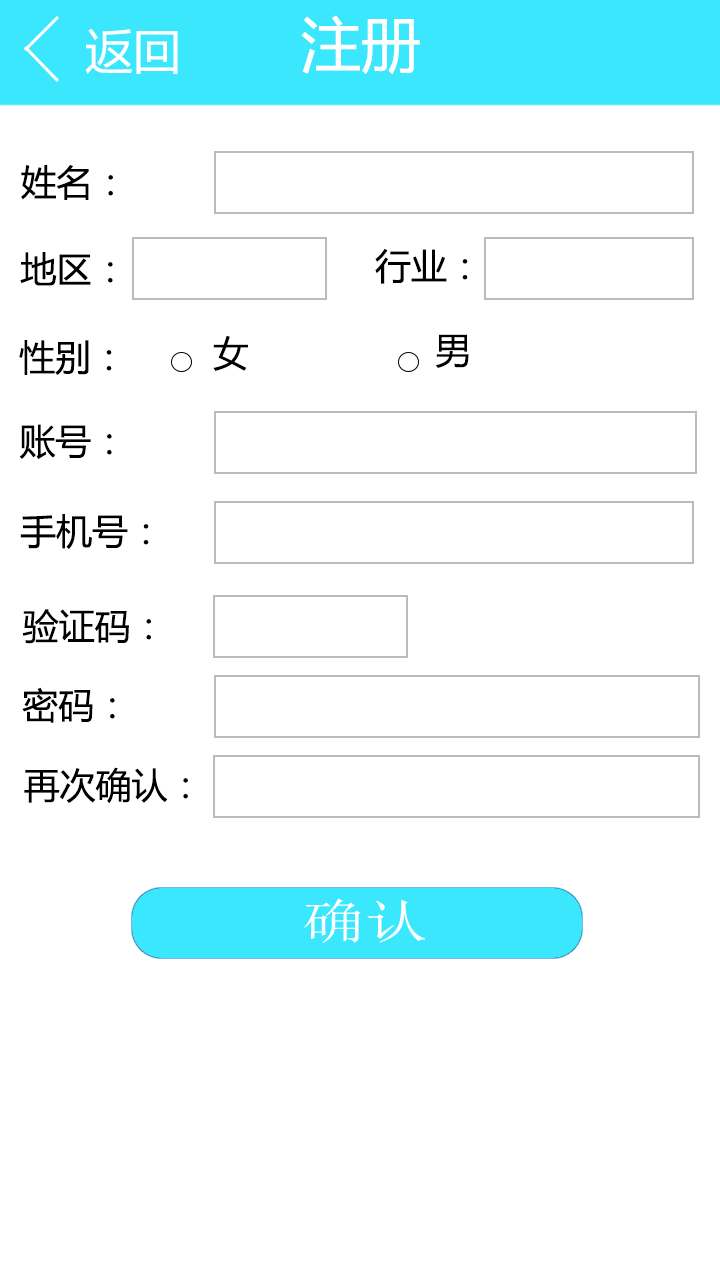
<style>
.page{position:relative;width:720px;height:1280px;background:#ffffff}
.page>*{position:absolute;margin:0}
.t1{font:60px "MicrosoftYaHei";color:#ffffff}
.t2{font:48px "MicrosoftYaHei";color:#ffffff}
.t3{font:36px "MicrosoftYaHei";color:#000000}
.t4{font:48px "NSimSun";color:#fffefe;scale:1.31 1}
</style>
<div class="page">
<p class="t1" style="left:301px;top:15px;width:119px;height:59px">注册</p>
<p class="t2" style="left:85px;top:28px;width:93px;height:46px">返回</p>
<p class="t3" style="left:21px;top:165px;width:92px;height:35px">姓名：</p>
<p class="t3" style="left:20px;top:252px;width:93px;height:34px">地区：</p>
<p class="t3" style="left:375px;top:248px;width:93px;height:36px">行业：</p>
<p class="t3" style="left:19px;top:340px;width:93px;height:35px">性别：</p>
<p class="t3" style="left:213px;top:336px;width:35px;height:35px">女</p>
<p class="t3" style="left:436px;top:334px;width:33px;height:34px">男</p>
<p class="t3" style="left:19px;top:424px;width:93px;height:35px">账号：</p>
<p class="t3" style="left:20px;top:514px;width:129px;height:35px">手机号：</p>
<p class="t3" style="left:22px;top:609px;width:129px;height:35px">验证码：</p>
<p class="t3" style="left:22px;top:687px;width:93px;height:36px">密码：</p>
<p class="t3" style="left:24px;top:767px;width:164px;height:36px">再次确认：</p>
<p class="t4" style="left:304px;top:898px;width:121px;height:45px">确认</p>
</div>
